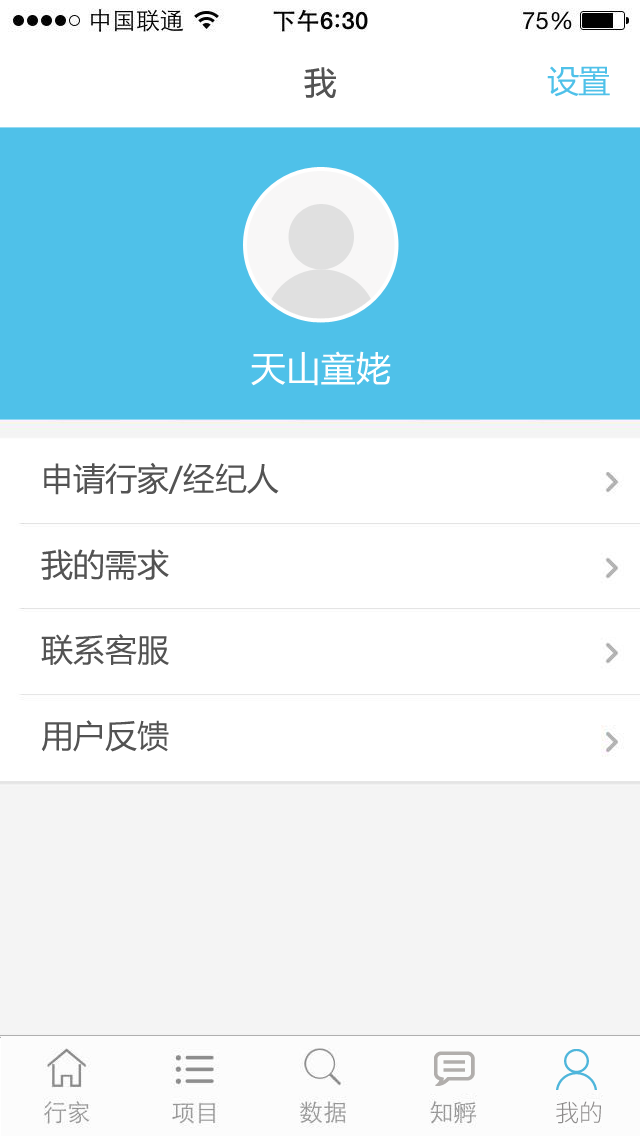
<style>
.page{position:relative;width:640px;height:1136px;background:#ffffff}
.page>*{position:absolute;margin:0}
.t1{font:32px "MicrosoftYaHei";letter-spacing:0.05em;color:#535353}
.t2{font:32px "MicrosoftYaHei";letter-spacing:-0.025em;color:#4fc1e9}
.t3{font:35px "MicrosoftYaHei";color:#ffffff}
.t4{font:32px "MicrosoftYaHei";color:#535353}
.t5{font:24px "SourceHanSansCN-Light";color:#8d8b8b}
</style>
<div class="page">
<p class="t1" style="left:304px;top:67px;width:32px;height:31px">我</p>
<p class="t2" style="left:547px;top:66px;width:63px;height:31px">设置</p>
<p class="t3" style="left:251px;top:351px;width:140px;height:35px">天山童姥</p>
<p class="t4" style="left:44px;top:462px;width:235px;height:33px">申请行家/经纪人</p>
<p class="t4" style="left:41px;top:549px;width:128px;height:32px">我的需求</p>
<p class="t4" style="left:41px;top:634px;width:128px;height:31px">联系客服</p>
<p class="t4" style="left:41px;top:720px;width:128px;height:32px">用户反馈</p>
<p class="t5" style="left:556px;top:1101px;width:45px;height:23px">我的</p>
</div>
